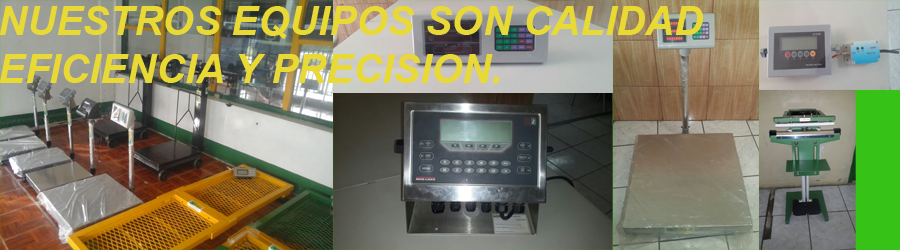
<style>
.page{position:relative;width:900px;height:250px}
.page>*{position:absolute;margin:0}
.t1{font:40px "Arial-BoldItalicMT";color:#e8d935}
</style>
<div class="page">
<p class="t1" style="left:0px;top:6px;width:703px;height:77px">NUESTROS EQUIPOS SON CALIDAD <br>EFICIENCIA Y PRECISION.</p>
</div>
